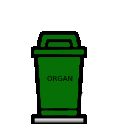
<style>
.page{position:relative;width:124px;height:124px;background:#ffffff}
.page>*{position:absolute;margin:0}
.t1{font:7px "DejaVuSans";color:#000000}
</style>
<div class="page">
<p class="t1" style="left:47px;top:75px;width:26px;height:7px">ORGAN</p>
</div>
